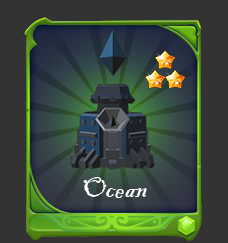
<style>
.page{position:relative;width:228px;height:243px;background:#333333}
.page>*{position:absolute;margin:0}
.t1{font:30px "BlackadderITC-Regular";color:#ffffff}
</style>
<div class="page">
<p class="t1" style="left:83px;top:177px;width:64px;height:21px">Ocean</p>
</div>
